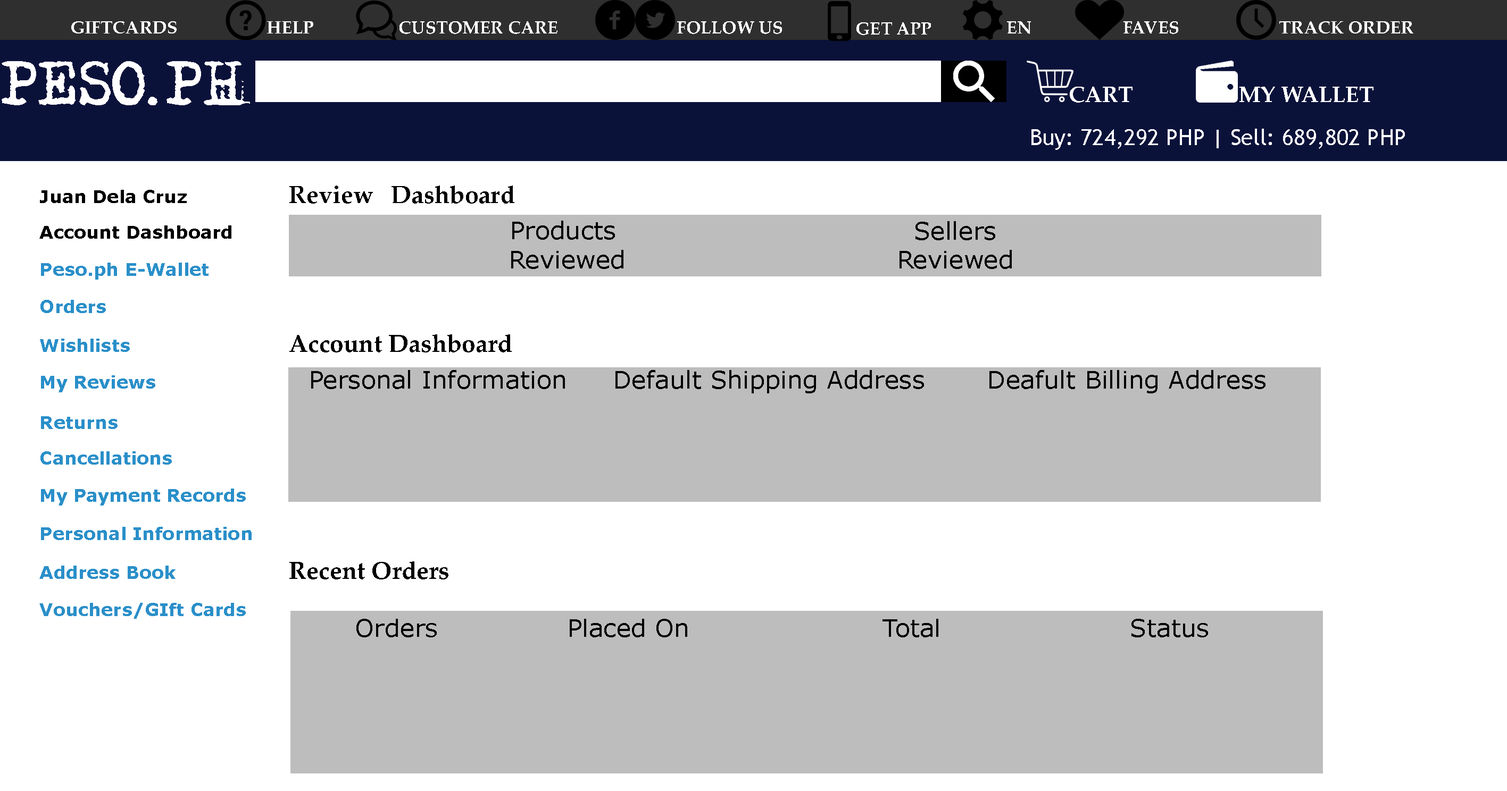
<style>
.page{position:relative;width:1507px;height:791px;background:#ffffff}
.page>*{position:absolute;margin:0}
.t1{font:17.7px "PalatinoLinotype-Bold";letter-spacing:0.005em;color:#ffffff}
.t2{font:17.7px "PalatinoLinotype-Bold";letter-spacing:0.005em;color:#fefefe}
.t3{font:55.3px "Adler";letter-spacing:0.005em;color:#ffffff}
.t4{font:22.2px "PalatinoLinotype-Bold";letter-spacing:0.005em;color:#ffffff}
.t5{font:22.2px "TrebuchetMS";letter-spacing:0.005em;color:#ffffff}
.t6{font:24.4px "PalatinoLinotype-Bold";letter-spacing:0.005em;color:#000000}
.t7{font:17.7px "Verdana-Bold";letter-spacing:0.005em;color:#000000}
.t8{font:24.4px "Verdana";letter-spacing:0.005em;color:#000000}
.t9{font:24.3px "Verdana";letter-spacing:0.005em;color:#000000}
.t10{font:17.7px "Verdana-Bold";letter-spacing:0.005em;color:#2a8fc9}
.t11{font:24.2px "Verdana";letter-spacing:0.005em;color:#000000}
</style>
<div class="page">
<p class="t1" style="left:71px;top:21px;width:106px;height:13px">GIFTCARDS</p>
<p class="t1" style="left:267px;top:21px;width:46px;height:13px">HELP</p>
<p class="t1" style="left:399px;top:21px;width:158px;height:13px">CUSTOMER CARE</p>
<p class="t1" style="left:677px;top:21px;width:105px;height:13px">FOLLOW US</p>
<p class="t1" style="left:856px;top:22px;width:75px;height:13px">GET APP</p>
<p class="t2" style="left:1007px;top:21px;width:24px;height:13px">EN</p>
<p class="t1" style="left:1123px;top:21px;width:55px;height:13px">FAVES</p>
<p class="t2" style="left:1279px;top:21px;width:134px;height:13px">TRACK ORDER</p>
<p class="t3" style="left:2px;top:61px;width:248px;height:44px">PESO.PH</p>
<p class="t4" style="left:1070px;top:87px;width:62px;height:16px">CART</p>
<p class="t4" style="left:1239px;top:87px;width:134px;height:15px">MY WALLET</p>
<p class="t5" style="left:1031px;top:129px;width:374px;height:21px">Buy: 724,292 PHP | Sell: 689,802 PHP</p>
<p class="t6" style="left:289px;top:186px;width:225px;height:18px">Review  Dashboard</p>
<p class="t7" style="left:40px;top:190px;width:147px;height:13px">Juan Dela Cruz</p>
<p class="t8" style="left:511px;top:221px;width:112px;height:48px;text-align:center">Products <br>Reviewed</p>
<p class="t9" style="left:899px;top:221px;width:113px;height:48px;text-align:center">Sellers<br>Reviewed</p>
<p class="t7" style="left:39px;top:226px;width:192px;height:13px">Account Dashboard</p>
<p class="t10" style="left:41px;top:263px;width:167px;height:17px">Peso.ph E-Wallet</p>
<p class="t10" style="left:40px;top:300px;width:66px;height:13px">Orders</p>
<p class="t10" style="left:40px;top:339px;width:90px;height:13px">Wishlists</p>
<p class="t6" style="left:289px;top:335px;width:223px;height:18px">Account Dashboard</p>
<p class="t10" style="left:41px;top:375px;width:114px;height:18px">My Reviews</p>
<p class="t9" style="left:311px;top:370px;width:254px;height:19px">Personal Information</p>
<p class="t8" style="left:615px;top:370px;width:309px;height:24px">Default Shipping Address</p>
<p class="t8" style="left:989px;top:370px;width:276px;height:24px">Deafult Billing Address</p>
<p class="t10" style="left:41px;top:416px;width:77px;height:13px">Returns</p>
<p class="t10" style="left:40px;top:452px;width:132px;height:13px">Cancellations</p>
<p class="t10" style="left:41px;top:489px;width:205px;height:17px">My Payment Records</p>
<p class="t10" style="left:41px;top:527px;width:211px;height:13px">Personal Information</p>
<p class="t10" style="left:39px;top:566px;width:137px;height:13px">Address Book</p>
<p class="t6" style="left:289px;top:562px;width:159px;height:18px">Recent Orders</p>
<p class="t10" style="left:39px;top:603px;width:207px;height:16px">Vouchers/GIft Cards</p>
<p class="t11" style="left:356px;top:619px;width:81px;height:19px">Orders</p>
<p class="t11" style="left:570px;top:619px;width:117px;height:19px">Placed On</p>
<p class="t11" style="left:882px;top:619px;width:56px;height:19px">Total</p>
<p class="t11" style="left:1131px;top:619px;width:77px;height:19px">Status</p>
</div>
